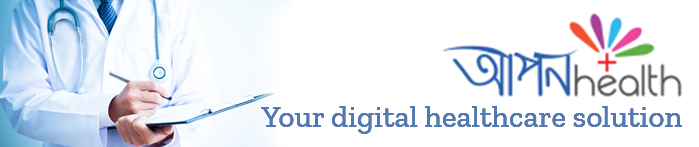
<style>
.page{position:relative;width:699px;height:147px;background:#ffffff}
.page>*{position:absolute;margin:0}
.t1{font:30.8px "ZillaSlab-Medium";color:#4f7aba}
</style>
<div class="page">
<p class="t1" style="left:261px;top:106px;width:421px;height:28px">Your digital healthcare solution</p>
</div>
